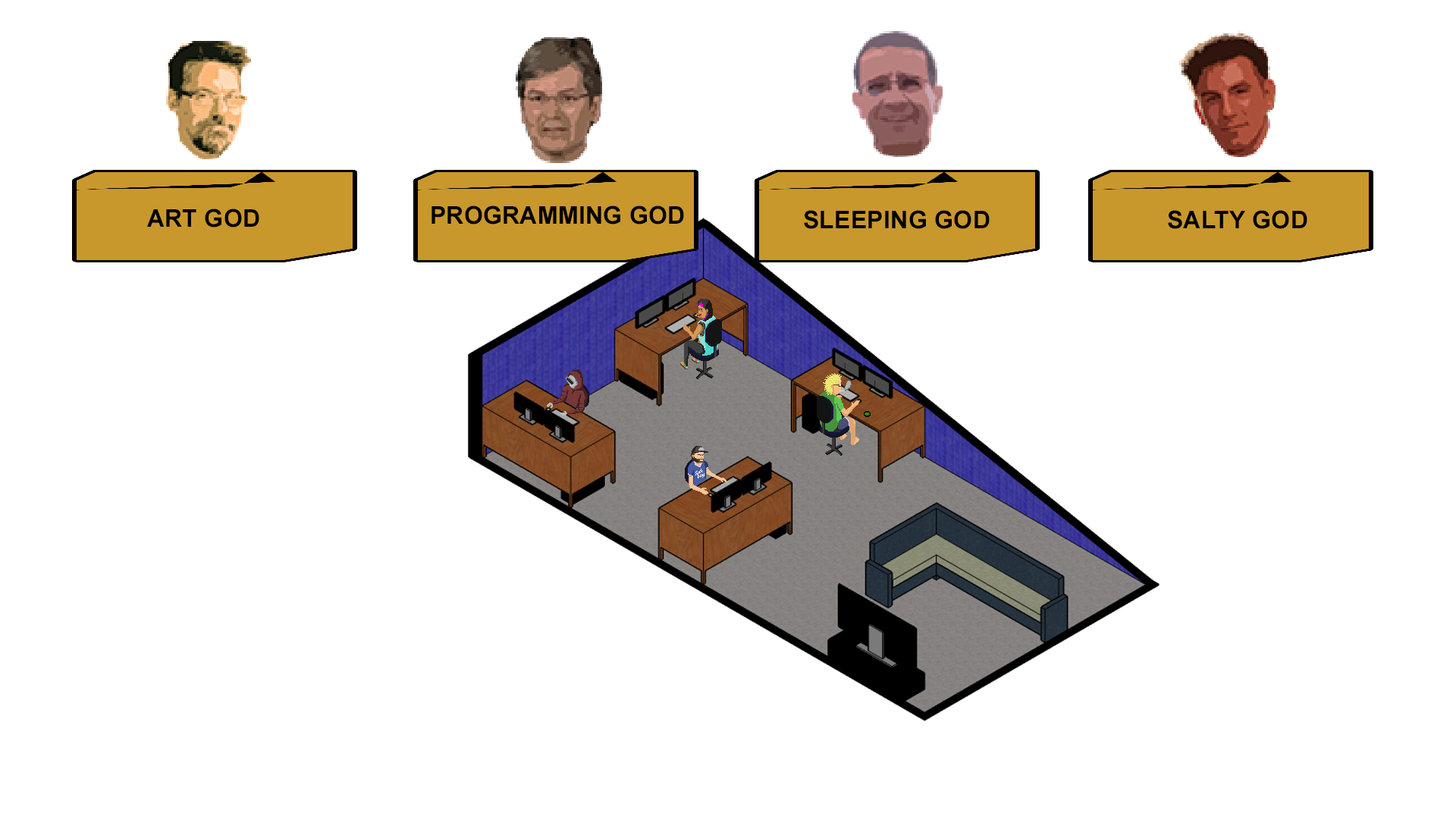
<style>
.page{position:relative;width:1456px;height:819px;background:#ffffff}
.page>*{position:absolute;margin:0}
.t1{font:24.3px "Arial-BoldMT";letter-spacing:0.01em;color:#000000}
</style>
<div class="page">
<p class="t1" style="left:147px;top:209px;width:112px;height:18px">ART GOD</p>
<p class="t1" style="left:431px;top:206px;width:253px;height:18px">PROGRAMMING GOD</p>
<p class="t1" style="left:804px;top:210px;width:186px;height:19px">SLEEPING GOD</p>
<p class="t1" style="left:1168px;top:210px;width:139px;height:19px">SALTY GOD</p>
</div>
